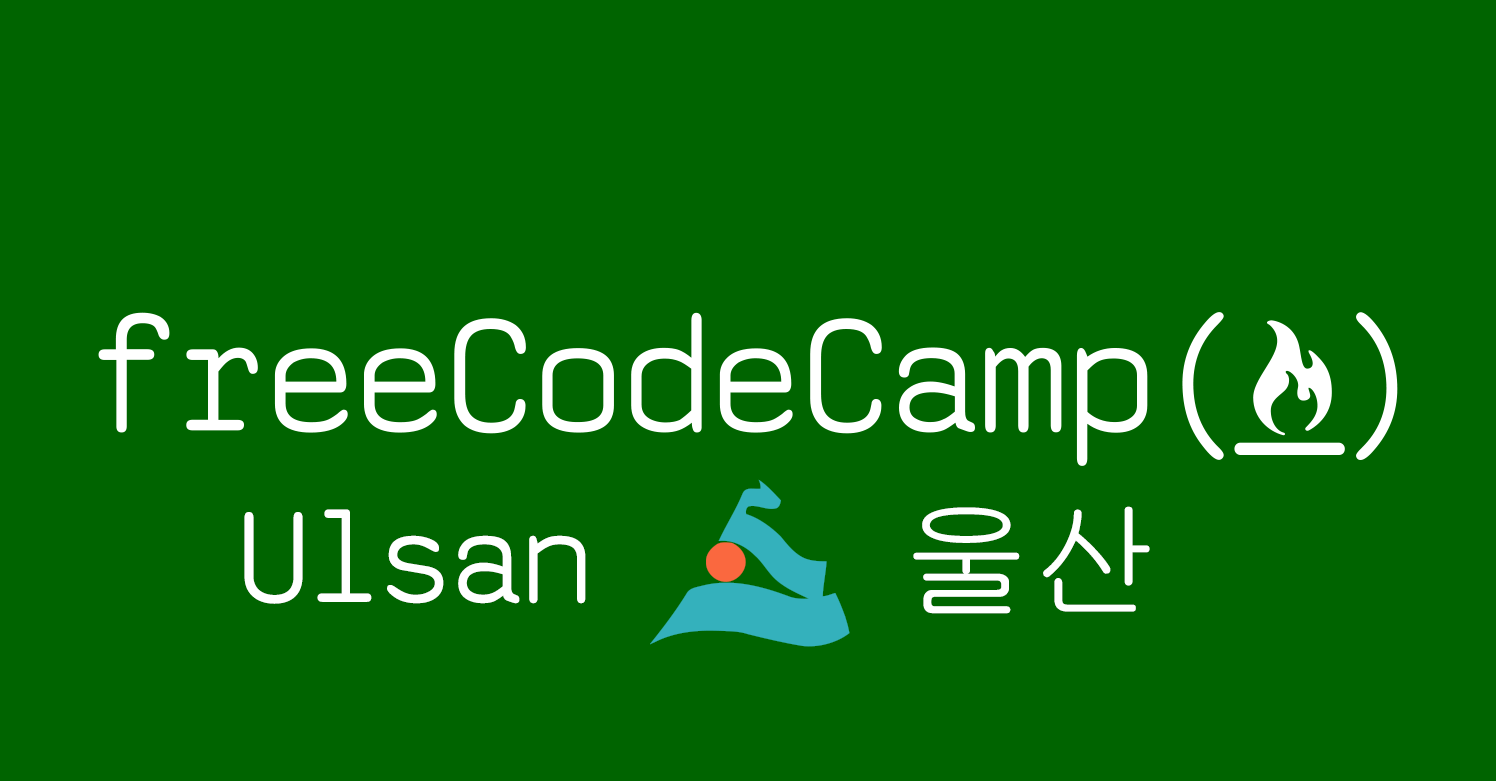
<style>
.page{position:relative;width:1496px;height:781px;background:#006400}
.page>*{position:absolute;margin:0}
.t1{font:131.8px "saxMono";color:#ffffff}
.t2{font:131.8px "Gulim";color:#ffffff}
</style>
<div class="page">
<p class="t1" style="left:244px;top:509px;width:342px;height:95px">Ulsan</p>
<p class="t2" style="left:913px;top:506px;width:237px;height:108px">울산</p>
</div>
